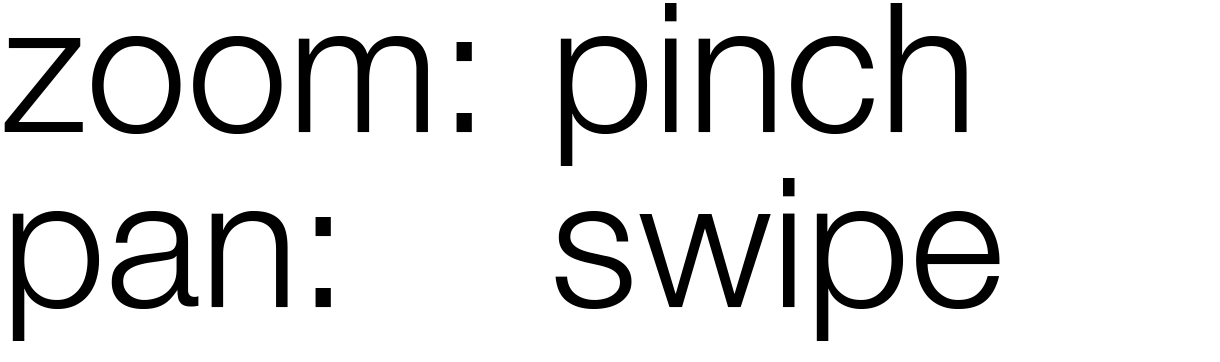
<style>
.page{position:relative;width:1220px;height:362px;background:#ffffff}
.page>*{position:absolute;margin:0}
.t1{font:181.4px/175px "HelveticaNeue-Light";color:#000000}
</style>
<div class="page">
<p class="t1" style="left:4px;top:3px;width:996px;height:338px">zoom:  pinch<br>pan:      swipe</p>
</div>
